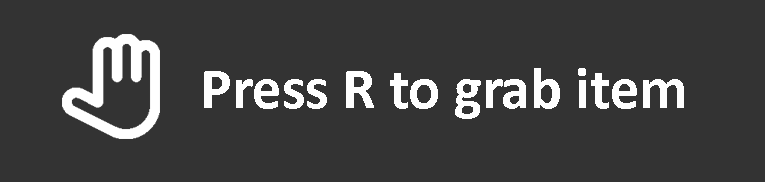
<style>
.page{position:relative;width:765px;height:182px;background:#333333}
.page>*{position:absolute;margin:0}
.t1{font:59px "Calibri-Bold";color:#ffffff}
</style>
<div class="page">
<p class="t1" style="left:204px;top:68px;width:480px;height:51px">Press R to grab item</p>
</div>
